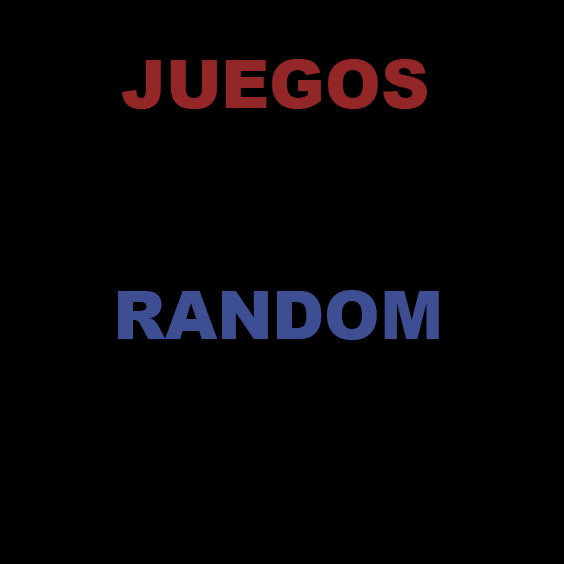
<style>
.page{position:relative;width:564px;height:564px;background:#000000}
.page>*{position:absolute;margin:0}
.t1{font:66.7px "Arial-Black";color:#932626}
.t2{font:66.7px "Arial-Black";color:#3d4e92}
</style>
<div class="page">
<p class="t1" style="left:122px;top:59px;width:305px;height:50px">JUEGOS</p>
<p class="t2" style="left:118px;top:290px;width:321px;height:50px">RANDOM</p>
</div>
